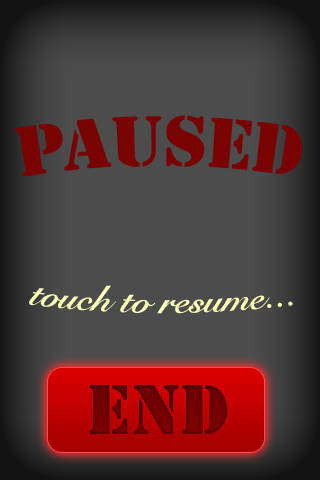
<style>
.page{position:relative;width:320px;height:480px;background:#4c4c4c}
.page>*{position:absolute;margin:0}
.t1{font:66px "StencilStd";color:#790303}
.t2{font:37px "SnellRoundhand-Bold";color:#feffb7}
</style>
<div class="page">
<p class="t1" style="left:14px;top:115px;width:288px;height:62px">Paused</p>
<p class="t2" style="left:29px;top:285px;width:264px;height:29px">touch to resume...</p>
<p class="t1" style="left:89px;top:385px;width:138px;height:49px">End</p>
</div>
